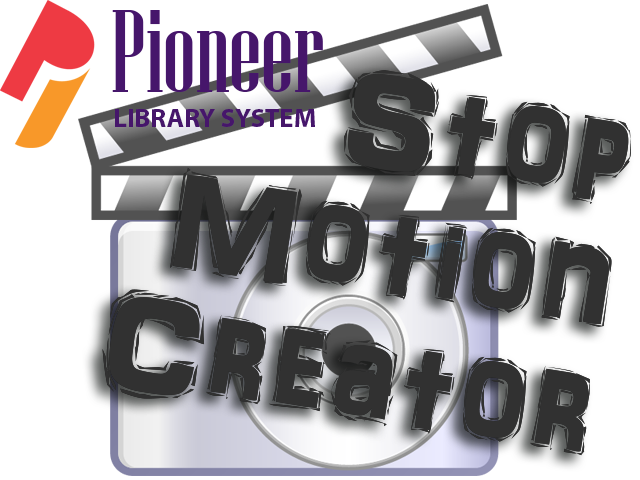
<style>
.page{position:relative;width:640px;height:480px;background:#ffffff}
.page>*{position:absolute;margin:0}
.t1{font:116.9px "NiagaraSolid-Reg";color:#46166b}
.t2{font:144px/129px "ARDARLING";color:#313131}
.t3{font:26.7px "MyriadPro-Bold";color:#46166b}
</style>
<div class="page">
<p class="t1" style="left:112px;top:10px;width:211px;height:82px">Pioneer</p>
<p class="t2" style="left:102px;top:70px;width:529px;height:386px;text-align:right;rotate:9deg">Stop<br>Motion<br>Creator</p>
<p class="t3" style="left:115px;top:109px;width:200px;height:18px">LIBRARY SYSTEM</p>
</div>
